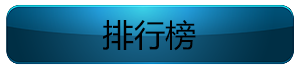
<style>
.page{position:relative;width:300px;height:71px}
.page>*{position:absolute;margin:0}
.t1{font:31.1px "MicrosoftYaHei";color:#000000}
</style>
<div class="page">
<p class="t1" style="left:103px;top:20px;width:93px;height:31px">排行榜</p>
</div>
